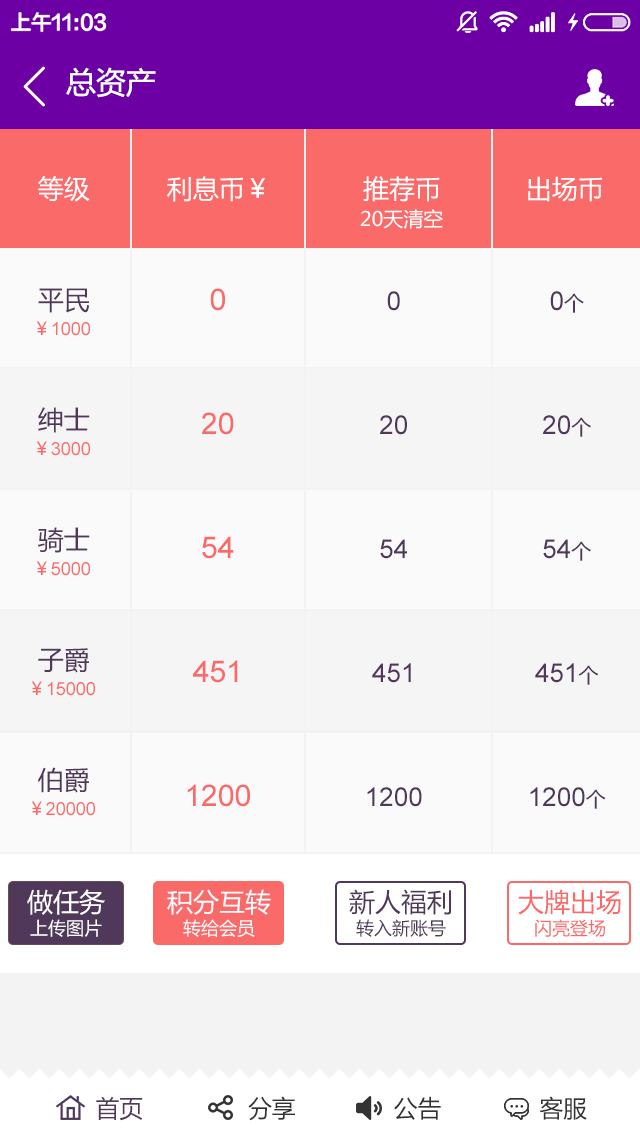
<style>
.page{position:relative;width:640px;height:1136px;background:#fafafa}
.page>*{position:absolute;margin:0}
.t1{font:30px "MicrosoftYaHei";color:#ffffff}
.t2{font:26px "MicrosoftYaHei";color:#ffffff}
.t3{font:20px "MicrosoftYaHei";color:#ffffff}
.t4{font:26px/60px "MicrosoftYaHei";color:#50385b}
.t5{font:30px/62px "ArialMT";color:#f96a69}
.t6{font:26px/62px "ArialMT";color:#50385b}
.t7{font:20px/62px "MicrosoftYaHei";color:#50385b}
.t8{font:18px/60px "ArialMT";color:#f96a69}
.t9{font:18px/60px "MicrosoftYaHei";color:#f96a69}
.t10{font:18px/30px "MicrosoftYaHei";color:#ffffff}
.t11{font:26px/30px "MicrosoftYaHei";color:#ffffff}
.t12{font:26px/30px "MicrosoftYaHei";color:#f5fbff}
.t13{font:18px/30px "MicrosoftYaHei";color:#f5fbff}
.t14{font:18px/30px "MicrosoftYaHei";color:#50385b}
.t15{font:26px/30px "MicrosoftYaHei";color:#50385b}
.t16{font:26px/30px "MicrosoftYaHei";color:#f96a69}
.t17{font:18px/30px "MicrosoftYaHei";color:#f96a69}
.t18{font:24px "MicrosoftYaHei";color:#333333}
.t19{font:24px "MicrosoftYaHei";color:#50385b}
</style>
<div class="page">
<p class="t1" style="left:66px;top:67px;width:90px;height:31px">总资产</p>
<p class="t2" style="left:38px;top:176px;width:564px;height:26px">等级          利息币￥            推荐币           出场币</p>
<p class="t3" style="left:360px;top:209px;width:83px;height:20px">20天清空</p>
<p class="t4" style="left:38px;top:288px;width:52px;height:505px">平民<br><br>绅士<br><br>骑士 <br><br>子爵<br><br>伯爵</p>
<p class="t5" style="left:187px;top:288px;width:63px;height:519px;text-align:center">0<br><br>20<br><br>54<br><br>451<br><br>1200</p>
<p class="t6" style="left:367px;top:291px;width:55px;height:516px;text-align:center">0<br><br>20<br><br>54<br><br>451<br><br>1200</p>
<p class="t6" style="left:530px;top:291px;width:76px;height:518px;text-align:center">0<span class="t7">个<br></span><br>20<span class="t7">个<br></span><br>54<span class="t7">个<br></span><br>451<span class="t7">个<br></span><br>1200<span class="t7">个</span></p>
<p class="t8" style="left:31px;top:321px;width:64px;height:495px;text-align:center"><span class="t9">￥</span>1000<br><br><span class="t9">￥</span>3000<br><br><span class="t9">￥</span>5000<br><br><span class="t9">￥</span>15000<br><span class="t9"><br>￥</span>20000</p>
<p class="t10" style="left:27px;top:889px;width:78px;height:48px;text-align:center"><span class="t11">做任务<br></span>上传图片</p>
<p class="t12" style="left:167px;top:889px;width:104px;height:48px;text-align:center">积分互转<br><span class="t13">转给会员</span></p>
<p class="t14" style="left:349px;top:889px;width:102px;height:48px;text-align:center"><span class="t15">新人福利<br></span>转入新账号</p>
<p class="t16" style="left:518px;top:889px;width:103px;height:48px;text-align:center">大牌出场<br><span class="t17">闪亮登场</span></p>
<p class="t18" style="left:96px;top:1096px;width:491px;height:25px"><span class="t19">首页</span>               分享              公告              客服</p>
</div>
